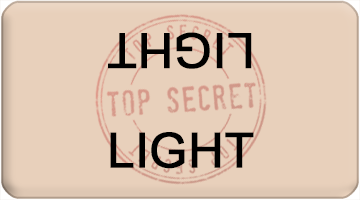
<style>
.page{position:relative;width:360px;height:200px;background:#e8d0bb}
.page>*{position:absolute;margin:0}
.t1{font:48px "ArialMT";color:#000000;font-weight:bold}
</style>
<div class="page">
<p class="t1" style="left:108px;top:32px;width:144px;height:37px;rotate:180deg">LIGHT</p>
<p class="t1" style="left:110px;top:132px;width:144px;height:37px">LIGHT</p>
</div>
